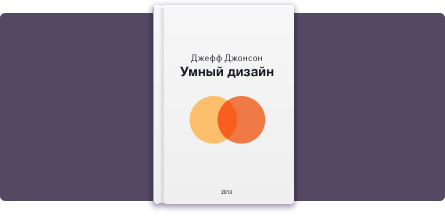
<style>
.page{position:relative;width:445px;height:217px;background:#534962}
.page>*{position:absolute;margin:0}
.t1{font:9px "DINPro-Regular"}
.t2{font:13px "HelveticaNeue-Bold";color:#191c23}
.t3{font:5px "DINPro-Medium"}
</style>
<div class="page">
<p class="t1" style="left:191px;top:54px;width:71px;height:9px">Джефф Джонсон</p>
<p class="t2" style="left:180px;top:66px;width:94px;height:12px">Умный дизайн</p>
<p class="t3" style="left:221px;top:190px;width:11px;height:4px">2013</p>
</div>
